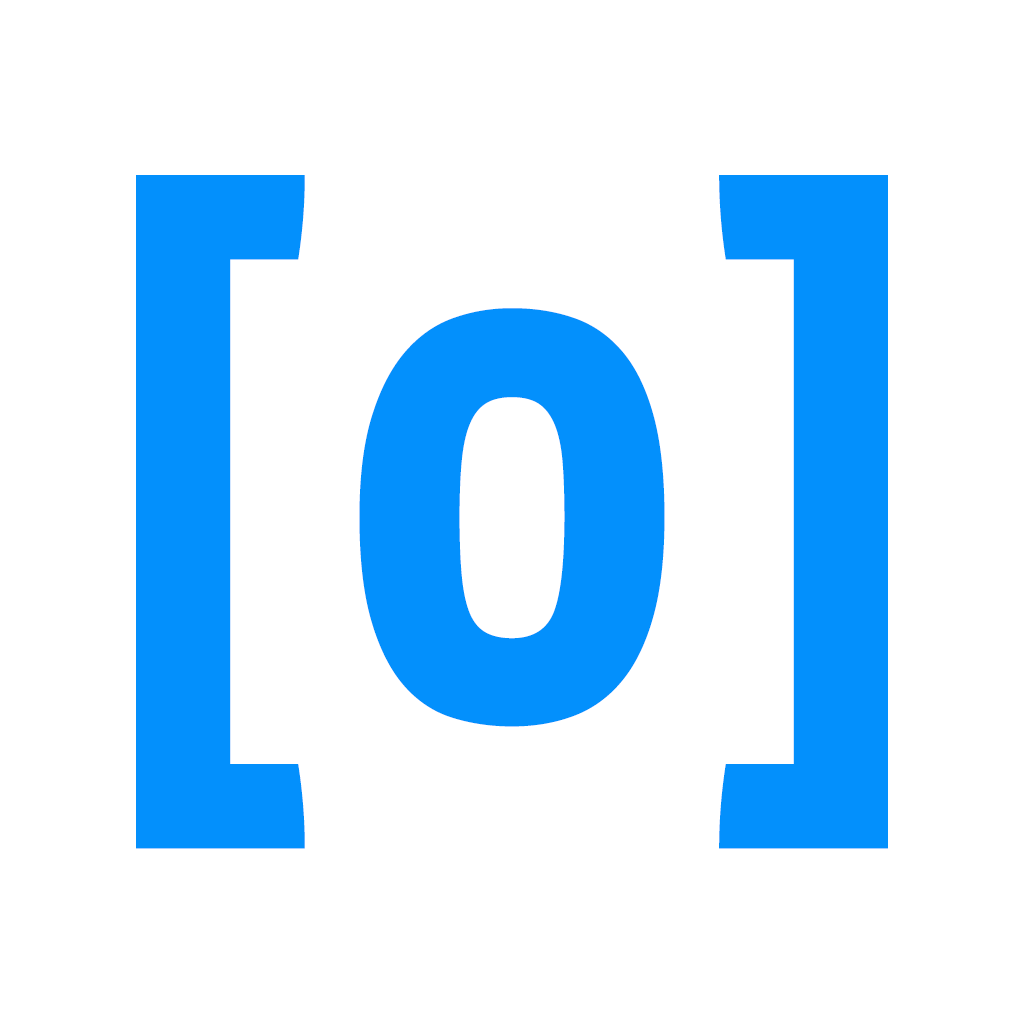
<style>
.page{position:relative;width:1024px;height:1024px;background:#ffffff}
.page>*{position:absolute;margin:0}
.t1{font:740.1px "VistaSansSCBold";color:#0390fc}
</style>
<div class="page">
<p class="t1" style="left:136px;top:175px;width:752px;height:674px">[0]</p>
</div>
